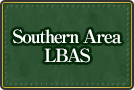
<style>
.page{position:relative;width:134px;height:90px}
.page>*{position:absolute;margin:0}
.t1{font:18px/19px "RyuminPro-ExBold";letter-spacing:-0.08em;color:#ffffff}
</style>
<div class="page">
<p class="t1" style="left:13px;top:29px;width:109px;height:34px;text-align:center">Southern Area<br>LBAS</p>
</div>
